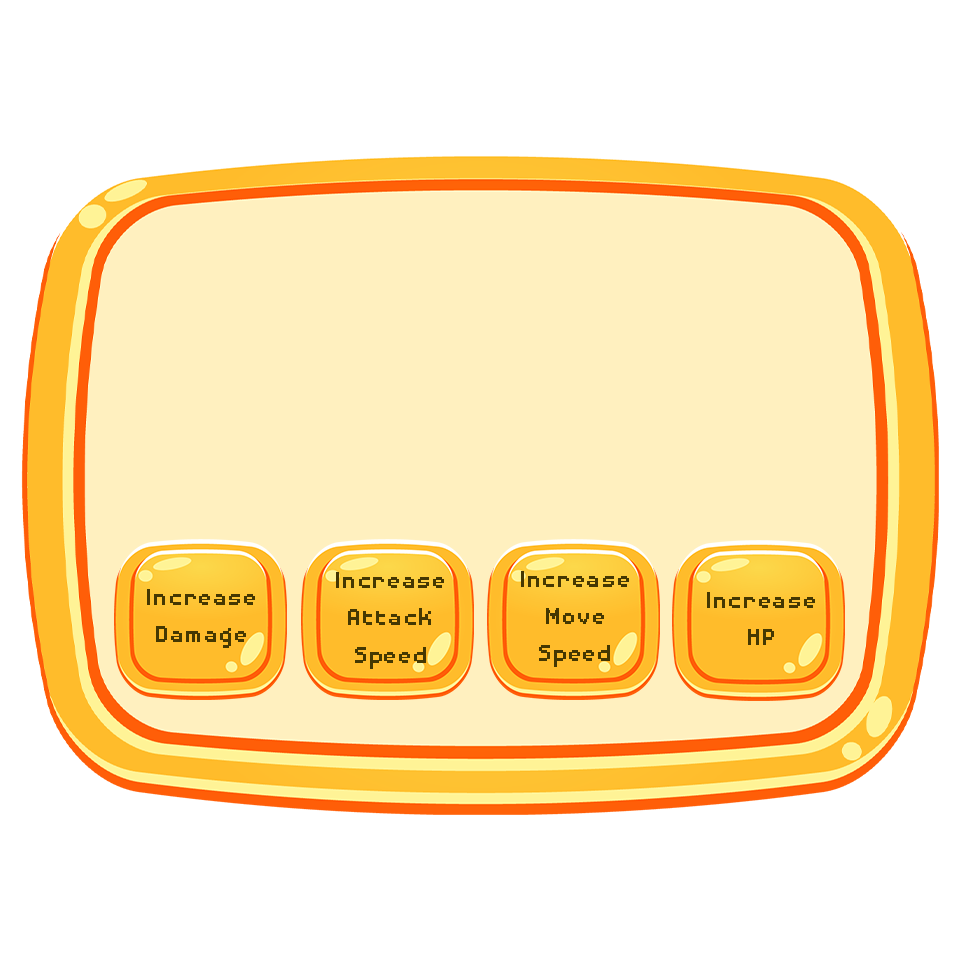
<style>
.page{position:relative;width:960px;height:960px;background:#ffffff}
.page>*{position:absolute;margin:0}
.t1{font:31.1px "DisposableDroidBB";color:#453802}
</style>
<div class="page">
<p class="t1" style="left:336px;top:572px;width:108px;height:97px;text-align:center">Increase<br>Attack<br>Speed</p>
<p class="t1" style="left:521px;top:571px;width:108px;height:96px;text-align:center">Increase<br>Move<br>Speed</p>
<p class="t1" style="left:147px;top:589px;width:108px;height:59px;text-align:center">Increase<br>Damage</p>
<p class="t1" style="left:707px;top:592px;width:108px;height:53px;text-align:center">Increase<br>HP</p>
</div>
